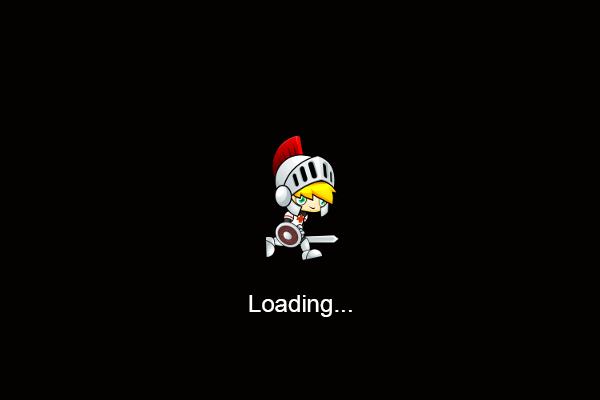
<style>
.page{position:relative;width:600px;height:400px;background:#030201}
.page>*{position:absolute;margin:0}
.t1{font:24px "ArialMT";color:#ffffff}
</style>
<div class="page">
<p class="t1" style="left:249px;top:295px;width:103px;height:22px">Loading...</p>
</div>
